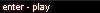
<style>
.page{position:relative;width:100px;height:13px;background:#000000}
.page>*{position:absolute;margin:0}
.t1{font:9px "ArialMT";color:#ffffff}
</style>
<div class="page">
<p class="t1" style="left:3px;top:3px;width:47px;height:9px">enter - play</p>
</div>
